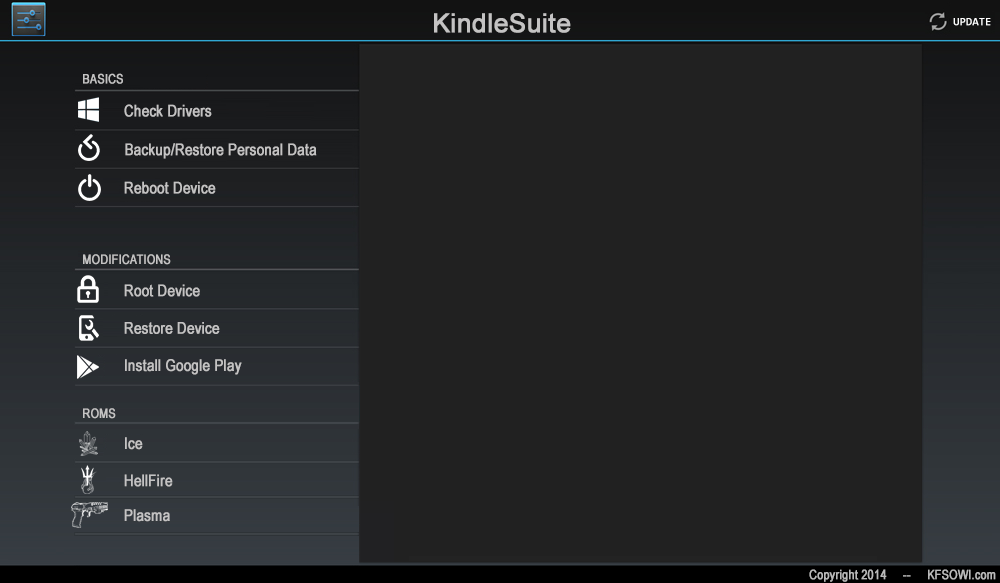
<style>
.page{position:relative;width:1000px;height:583px;background:#212121}
.page>*{position:absolute;margin:0}
.t1{font:26px "ArialMT";color:#c4c3c3;font-weight:bold}
.t2{font:11px "Consolas";color:#ffffff;font-weight:bold}
.t3{font:13px "ArialNarrow";color:#c4c3c3;font-weight:bold}
.t4{font:16px "ArialNarrow";color:#c4c3c3;font-weight:bold}
.t5{font:13px "ArialNarrow";color:#bababa;font-weight:bold}
</style>
<div class="page">
<p class="t1" style="left:434px;top:13px;width:137px;height:20px">KindleSuite</p>
<p class="t2" style="left:953px;top:18px;width:38px;height:8px">UPDATE</p>
<p class="t3" style="left:83px;top:73px;width:40px;height:11px">BASICS</p>
<p class="t4" style="left:124px;top:104px;width:88px;height:13px">Check Drivers</p>
<p class="t4" style="left:125px;top:143px;width:192px;height:16px">Backup/Restore Personal Data</p>
<p class="t4" style="left:124px;top:181px;width:92px;height:13px">Reboot Device</p>
<p class="t3" style="left:83px;top:254px;width:88px;height:11px">MODIFICATIONS</p>
<p class="t4" style="left:124px;top:284px;width:76px;height:13px">Root Device</p>
<p class="t4" style="left:124px;top:322px;width:96px;height:12px">Restore Device</p>
<p class="t4" style="left:125px;top:359px;width:117px;height:16px">Install Google Play</p>
<p class="t3" style="left:83px;top:408px;width:33px;height:11px">ROMS</p>
<p class="t4" style="left:125px;top:437px;width:18px;height:13px">Ice</p>
<p class="t4" style="left:124px;top:474px;width:49px;height:13px">HellFire</p>
<p class="t4" style="left:124px;top:509px;width:46px;height:13px">Plasma</p>
<p class="t5" style="left:809px;top:569px;width:187px;height:13px">Copyright 2014     --     KFSOWI.com</p>
</div>
